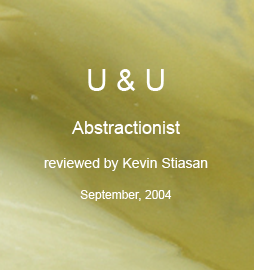
<style>
.page{position:relative;width:254px;height:270px}
.page>*{position:absolute;margin:0}
.t1{font:14px "ArialMT";color:#ffffff}
.t2{font:30px "ArialMT";color:#ffffff}
.t3{font:18px "ArialMT";color:#ffffff}
.t4{font:12px "ArialMT";color:#ffffff}
</style>
<div class="page">
<p class="t1" style="left:44px;top:69px;width:164px;height:132px;text-align:center"><span class="t2">U &amp; U<br></span><span class="t3"><br>Abstractionist<br></span><br>reviewed by Kevin Stiasan<br><br><span class="t4">September, 2004</span></p>
</div>
